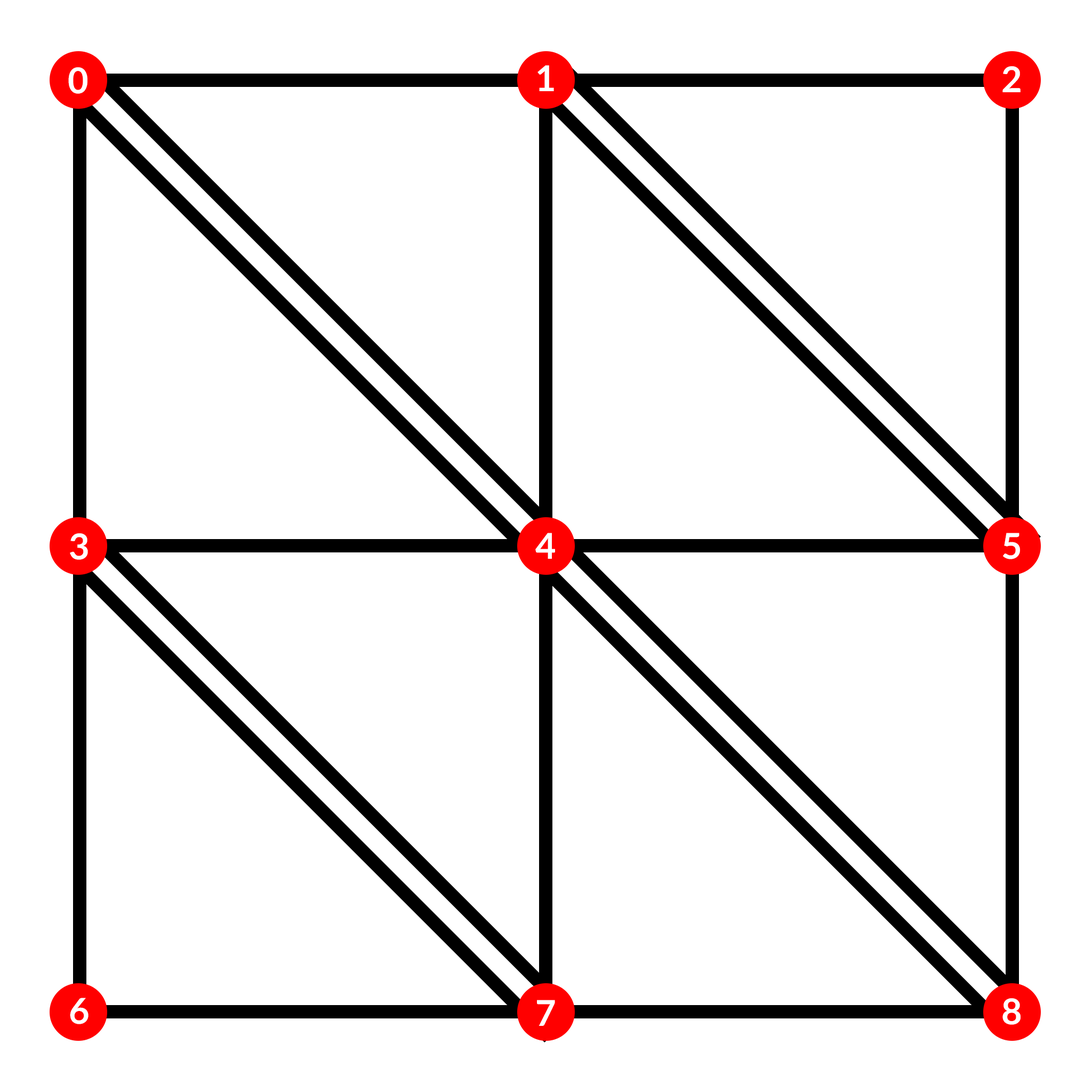
<style>
.page{position:relative;width:1092px;height:1092px;background:#ffffff}
.page>*{position:absolute;margin:0}
.t1{font:35.5px "Lato-Bold";color:#ffffff}
</style>
<div class="page">
<p class="t1" style="left:537px;top:65px;width:17px;height:26px">1</p>
<p class="t1" style="left:68px;top:67px;width:19px;height:27px">0</p>
<p class="t1" style="left:1002px;top:66px;width:19px;height:26px">2</p>
<p class="t1" style="left:70px;top:533px;width:18px;height:27px">3</p>
<p class="t1" style="left:535px;top:533px;width:20px;height:26px">4</p>
<p class="t1" style="left:1003px;top:533px;width:17px;height:26px">5</p>
<p class="t1" style="left:70px;top:998px;width:19px;height:26px">6</p>
<p class="t1" style="left:537px;top:1000px;width:18px;height:26px">7</p>
<p class="t1" style="left:1002px;top:998px;width:19px;height:27px">8</p>
</div>
